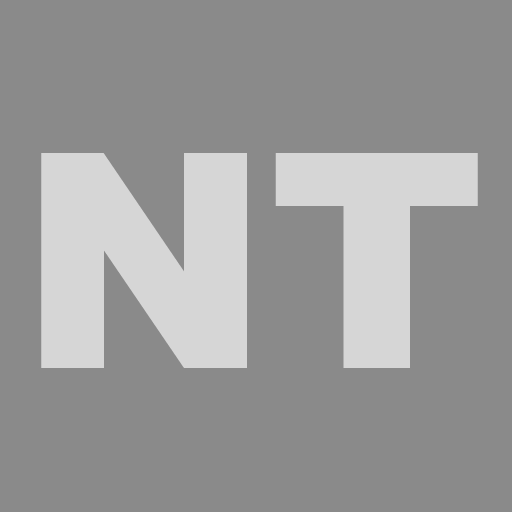
<style>
.page{position:relative;width:512px;height:512px;background:#8a8a8a}
.page>*{position:absolute;margin:0}
.t1{font:300px "Arial-Black";color:#d6d6d6}
</style>
<div class="page">
<p class="t1" style="left:41px;top:153px;width:437px;height:215px">NT</p>
</div>
